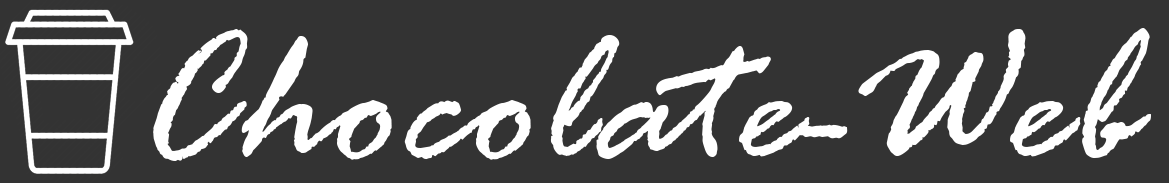
<style>
.page{position:relative;width:1169px;height:183px;background:#333333}
.page>*{position:absolute;margin:0}
.t1{font:200px "RageItalic";color:#ffffff}
</style>
<div class="page">
<p class="t1" style="left:153px;top:28px;width:998px;height:133px">Chocolate-Web</p>
</div>
